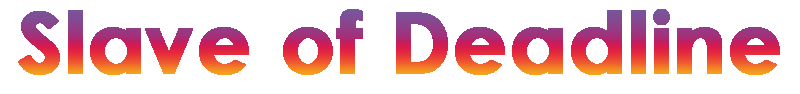
<style>
.page{position:relative;width:800px;height:94px;background:#ffffff}
.page>*{position:absolute;margin:0}
.t1{font:85px "CenturyGothic-Bold";font-weight:bold}
</style>
<div class="page">
<p class="t1" style="left:18px;top:9px;width:762px;height:66px">Slave of Deadline</p>
</div>
